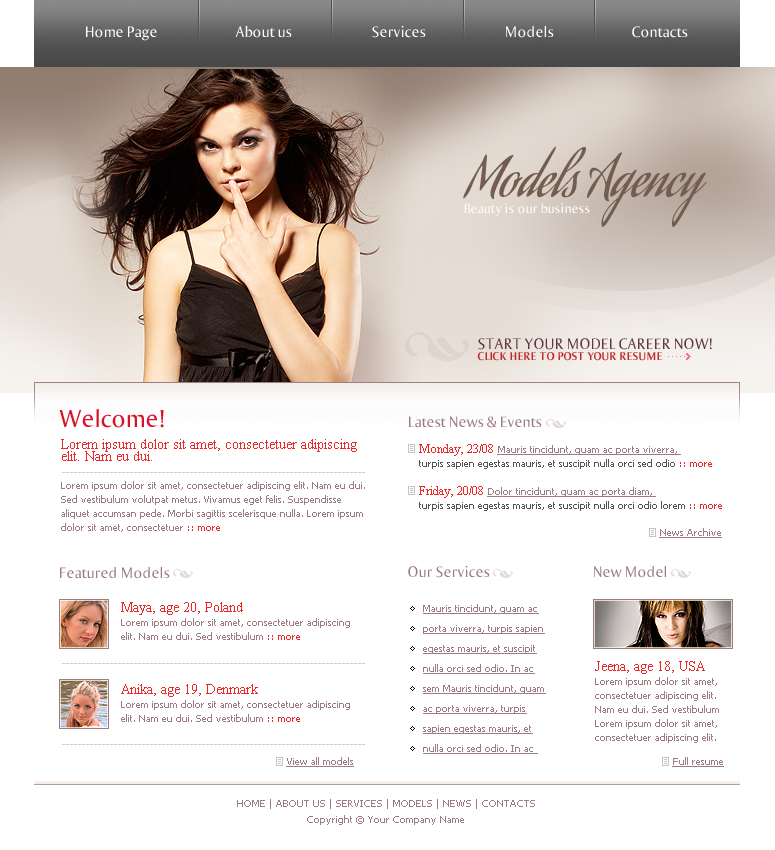
<style>
.page{position:relative;width:775px;height:850px;background:#ffffff}
.page>*{position:absolute;margin:0}
.t1{font:16px "Ogirema";color:#ffffff}
.t2{font:53.3px "AguafinaScript";color:#735d51}
.t3{font:14px "Ogirema";color:#fffdfe}
.t4{font:16px "Ogirema";color:#61353e}
.t5{font:12px "OgiremaBold";color:#bf292a}
.t6{font:26px "Ogirema";color:#d6132a}
.t7{font:16px "Ogirema";color:#9c7c81}
.t8{font:10px/14px "Tahoma";color:#9c7c81}
.t9{font:14px/12px "TimesNewRomanPSMT";color:#ec2828}
.t10{font:10px/14px "Tahoma";color:#ec2828}
.t11{font:10px/14px "Tahoma";color:#535353}
.t12{font:12px/14px "TimesNewRomanPSMT";color:#ec2828}
.t13{font:10px/14px "Tahoma";color:#9c7c81;text-decoration:underline}
.t14{font:10px "Tahoma";color:#cccccc}
.t15{font:10px "Tahoma";color:#9c7c81;text-decoration:underline}
.t16{font:10px/20px "Tahoma";color:#9c7c81;text-decoration:underline}
.t17{font:10px/16px "Tahoma";color:#9c7c81}
</style>
<div class="page">
<p class="t1" style="left:86px;top:26px;width:71px;height:15px">Home Page</p>
<p class="t1" style="left:235px;top:25px;width:57px;height:13px">About us</p>
<p class="t1" style="left:372px;top:25px;width:54px;height:13px">Services</p>
<p class="t1" style="left:506px;top:25px;width:48px;height:13px">Models</p>
<p class="t1" style="left:632px;top:26px;width:56px;height:12px">Contacts</p>
<p class="t2" style="left:463px;top:146px;width:244px;height:81px">Models Agency</p>
<p class="t3" style="left:464px;top:203px;width:126px;height:13px">Beauty is our business</p>
<p class="t4" style="left:478px;top:338px;width:234px;height:12px">START YOUR MODEL CAREER NOW!</p>
<p class="t5" style="left:477px;top:352px;width:185px;height:9px">CLICK HERE TO POST YOUR RESUME</p>
<p class="t6" style="left:59px;top:408px;width:105px;height:20px">Welcome!</p>
<p class="t7" style="left:409px;top:416px;width:133px;height:12px">Latest News &amp; Events</p>
<p class="t8" style="left:61px;top:439px;width:304px;height:93px"><span class="t9">Lorem ipsum dolor sit amet, consectetuer adipiscing elit. Nam eu dui. <br></span><br>Lorem ipsum dolor sit amet, consectetuer adipiscing elit. Nam eu dui. Sed vestibulum volutpat metus. Vivamus eget felis. Suspendisse aliquet accumsan pede. Morbi sagittis scelerisque nulla. Lorem ipsum dolor sit amet, consectetuer<span class="t10"> :: more</span></p>
<p class="t11" style="left:419px;top:444px;width:303px;height:67px"><span class="t12">Monday, 23/08 </span><span class="t13">Mauris tincidunt, quam ac porta viverra, <br></span>turpis sapien egestas mauris, et suscipit nulla orci sed odio<span class="t10"> :: more<br><br></span><span class="t12">Friday, 20/08 </span><span class="t13">Dolor tincidunt, quam ac porta diam, <br></span>turpis sapien egestas mauris, et suscipit nulla orci odio lorem <span class="t10">:: more</span></p>
<p class="t14" style="left:62px;top:472px;width:303px;height:1px">----------------------------------------------------------------------------</p>
<p class="t15" style="left:659px;top:528px;width:63px;height:10px">News Archive</p>
<p class="t7" style="left:60px;top:566px;width:110px;height:13px">Featured Models</p>
<p class="t7" style="left:408px;top:565px;width:82px;height:13px">Our Services</p>
<p class="t7" style="left:594px;top:565px;width:72px;height:13px">New Model</p>
<p class="t8" style="left:121px;top:602px;width:229px;height:38px"><span class="t9">Maya, age 20, Poland<br></span>Lorem ipsum dolor sit amet, consectetuer adipiscing elit. Nam eu dui. Sed vestibulum <span class="t10">:: more</span></p>
<p class="t16" style="left:423px;top:604px;width:123px;height:150px">Mauris tincidunt, quam ac porta viverra, turpis sapien egestas mauris, et suscipit nulla orci sed odio. In ac sem Mauris tincidunt, quam ac porta viverra, turpis sapien egestas mauris, et nulla orci sed odio. In ac</p>
<p class="t14" style="left:62px;top:663px;width:303px;height:1px">----------------------------------------------------------------------------</p>
<p class="t8" style="left:595px;top:661px;width:124px;height:82px"><span class="t9">Jeena, age 18, USA<br></span>Lorem ipsum dolor sit amet, consectetuer adipiscing elit. Nam eu dui. Sed vestibulum Lorem ipsum dolor sit amet, consectetuer adipiscing elit.</p>
<p class="t8" style="left:121px;top:684px;width:229px;height:38px"><span class="t9">Anika, age 19, Denmark<br></span>Lorem ipsum dolor sit amet, consectetuer adipiscing elit. Nam eu dui. Sed vestibulum <span class="t10">:: more</span></p>
<p class="t14" style="left:62px;top:744px;width:303px;height:1px">----------------------------------------------------------------------------</p>
<p class="t15" style="left:286px;top:757px;width:68px;height:10px">View all models</p>
<p class="t15" style="left:672px;top:757px;width:52px;height:10px">Full resume</p>
<p class="t17" style="left:237px;top:799px;width:298px;height:26px;text-align:center">HOME | ABOUT US | SERVICES | MODELS | NEWS | CONTACTS<br>Copyright © Your Company Name</p>
</div>
